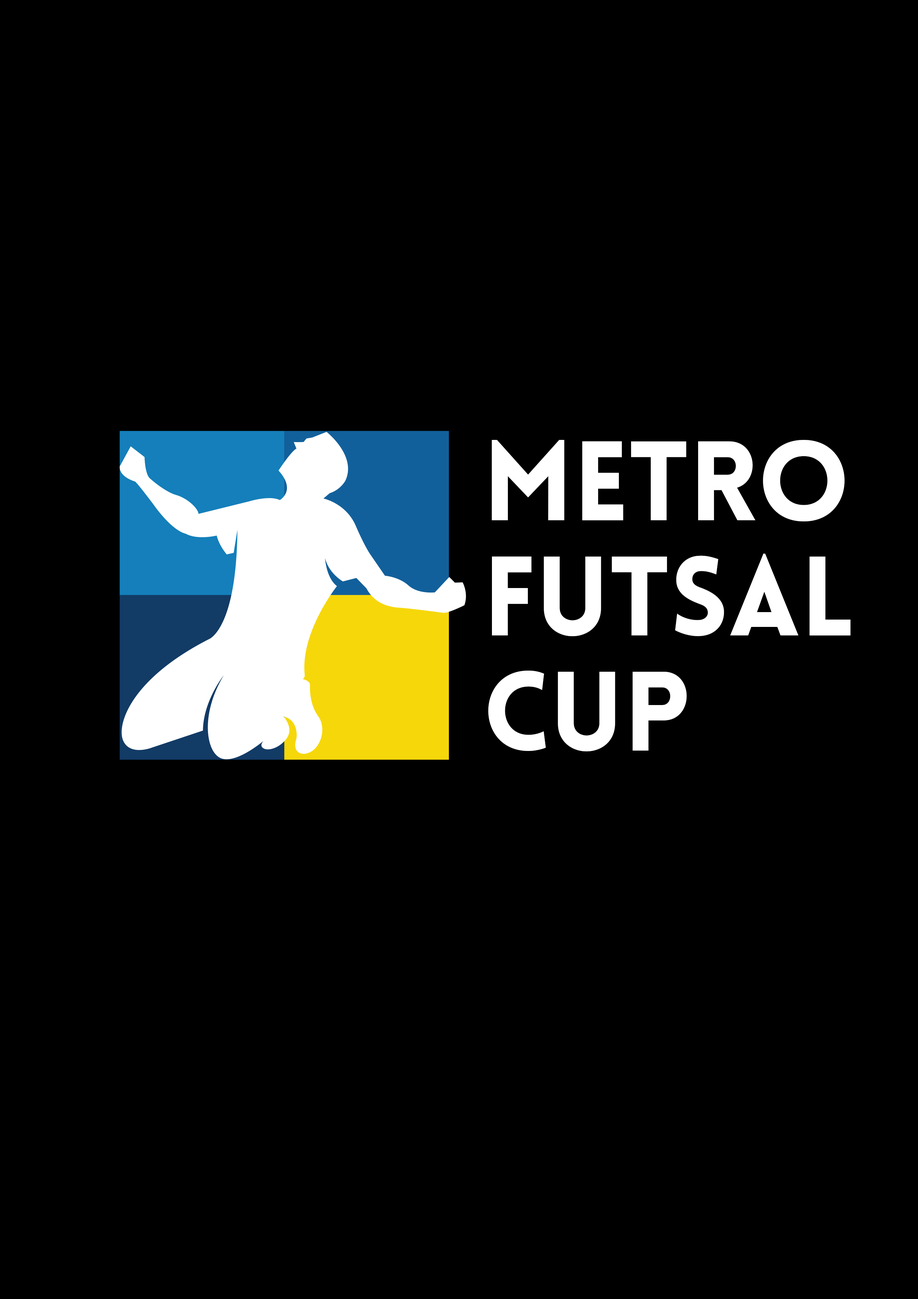
<style>
.page{position:relative;width:918px;height:1299px;background:#000000}
.page>*{position:absolute;margin:0}
.t1{font:110.4px/115.2px "LoveloBlack";color:#ffffff}
</style>
<div class="page">
<p class="t1" style="left:488px;top:440px;width:363px;height:312px">metro<br>futsal<br>cup</p>
</div>
